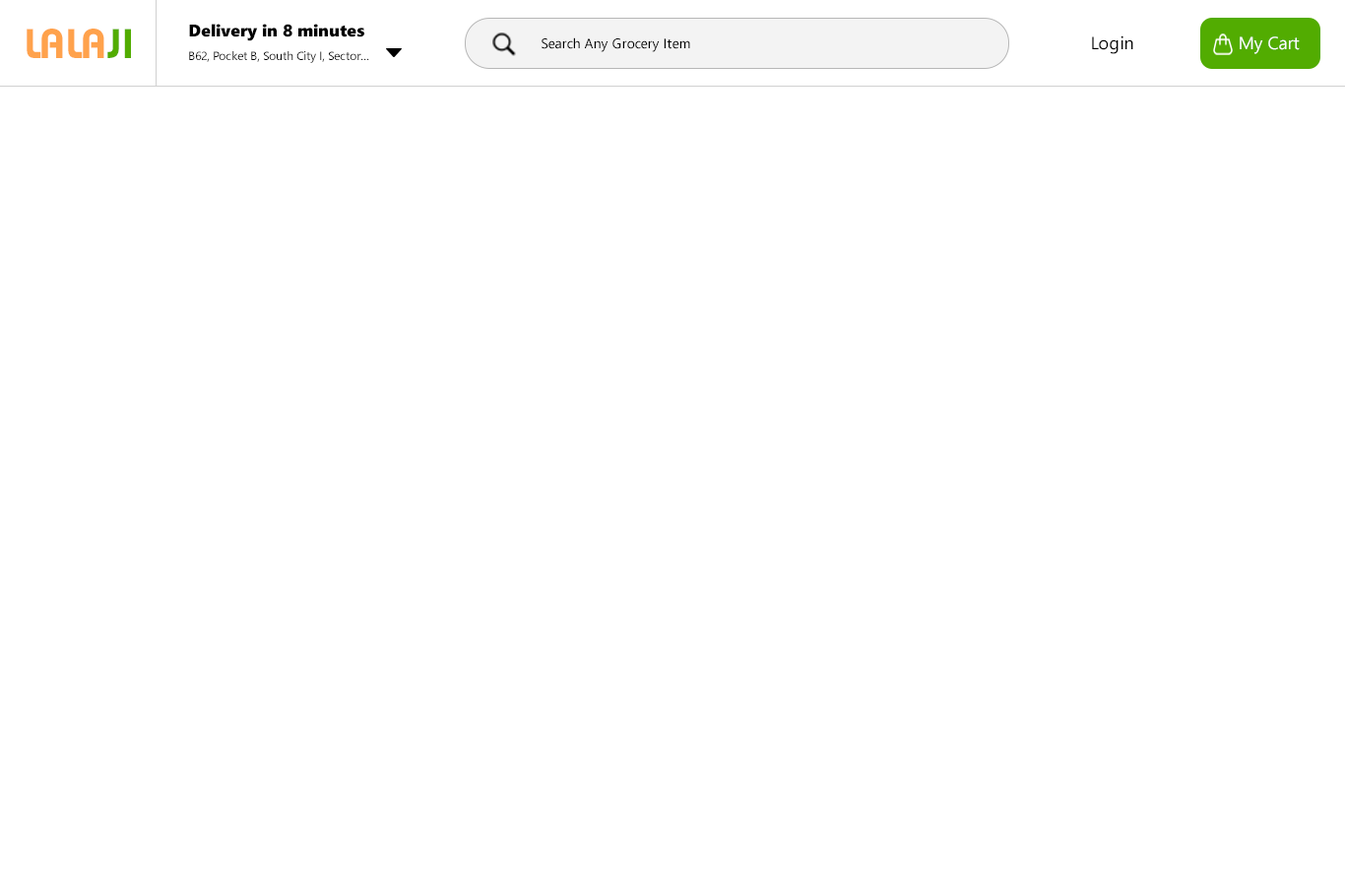
<style>
.page{position:relative;width:1345px;height:886px;background:#ffffff}
.page>*{position:absolute;margin:0}
.t1{font:41.5px "Bauhaus-Demi";color:#ffa24c}
.t2{font:41.5px "Bauhaus-Demi";color:#52ac01}
.t3{font:16.7px "SegoeUIBlack";color:#000000}
.t4{font:13.8px "SegoeUI";color:#000000}
.t5{font:17.7px "SegoeUI";color:#000000}
.t6{font:17.7px "SegoeUI";color:#ffffff}
.t7{font:11.8px "SegoeUI";color:#000000}
</style>
<div class="page">
<p class="t1" style="left:27px;top:29px;width:104px;height:29px">LALA<span class="t2">JI</span></p>
<p class="t3" style="left:189px;top:24px;width:175px;height:17px">Delivery in 8 minutes</p>
<p class="t4" style="left:542px;top:37px;width:148px;height:15px">Search Any Grocery Item</p>
<p class="t5" style="left:1092px;top:35px;width:42px;height:19px">Login</p>
<p class="t6" style="left:1240px;top:36px;width:60px;height:18px">My Cart</p>
<p class="t7" style="left:189px;top:51px;width:180px;height:12px">B62, Pocket B, South City I, Sector...</p>
</div>
